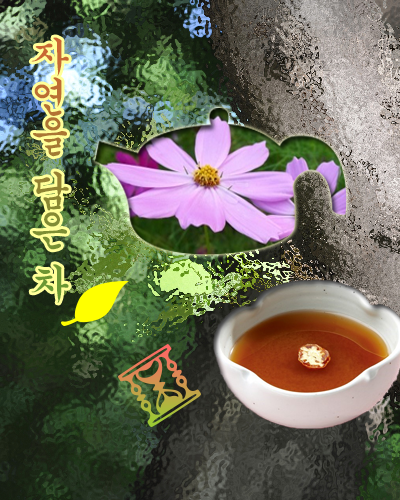
<style>
.page{position:relative;width:400px;height:500px}
.page>*{position:absolute;margin:0}
.t1{font:40.1px "Gungsuh"}
</style>
<div class="page">
<p class="t1" style="left:31px;top:37px;width:38px;height:266px">자연을 담은 차</p>
</div>
